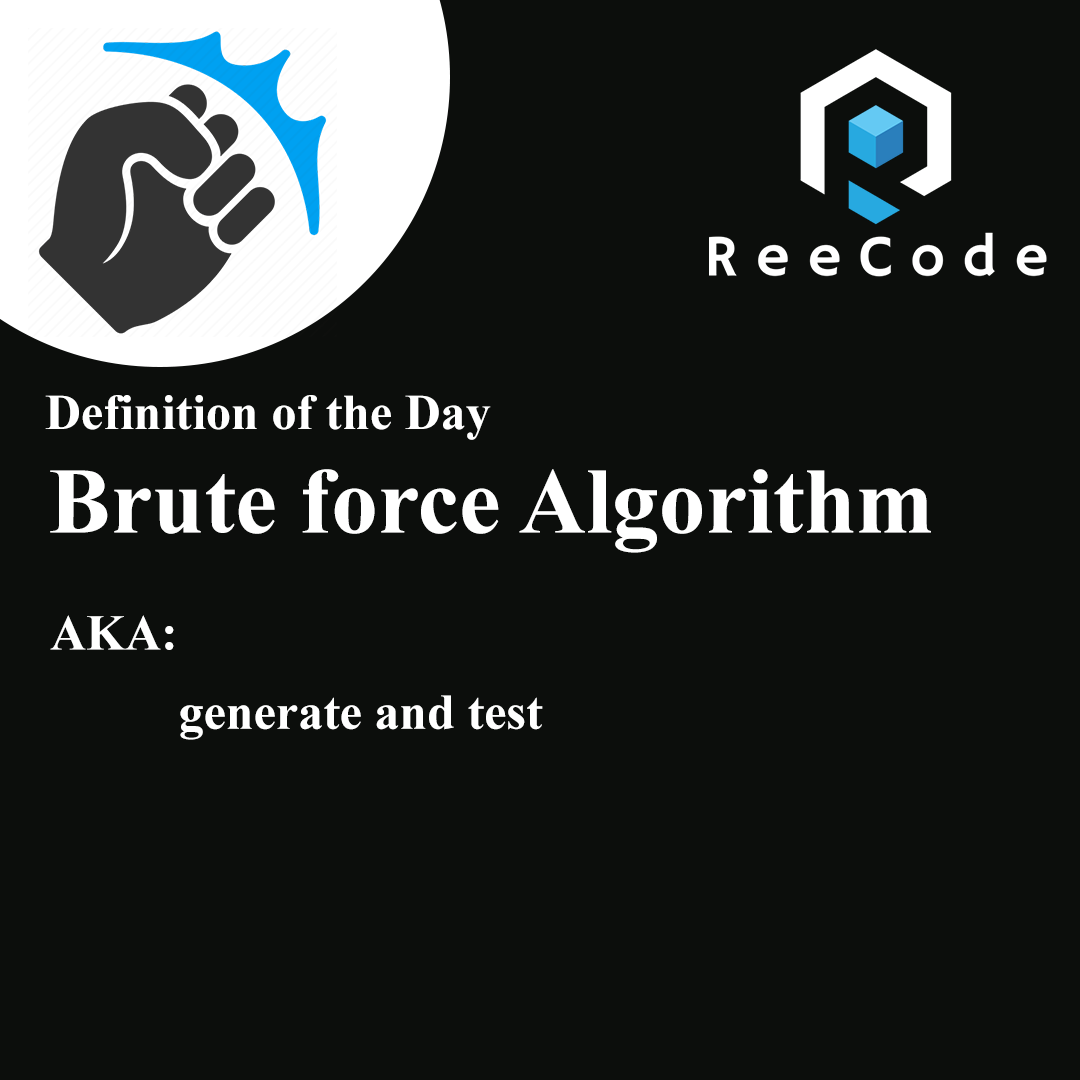
<style>
.page{position:relative;width:1080px;height:1080px;background:#0c0e0c}
.page>*{position:absolute;margin:0}
.t1{font:50px "TimesNewRomanPS-BoldMT";color:#ffffff}
.t2{font:93.4px "TimesNewRomanPS-BoldMT";color:#ffffff}
</style>
<div class="page">
<p class="t1" style="left:45px;top:395px;width:446px;height:45px">Definition of the Day</p>
<p class="t2" style="left:50px;top:469px;width:881px;height:84px">Brute force Algorithm</p>
<p class="t1" style="left:50px;top:615px;width:124px;height:35px">AKA:</p>
<p class="t1" style="left:180px;top:695px;width:363px;height:45px">generate and test</p>
</div>
